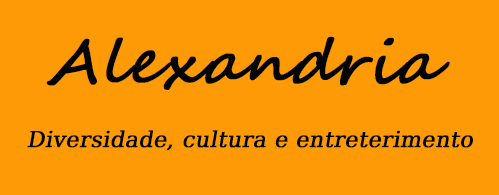
<style>
.page{position:relative;width:499px;height:195px;background:#fd9a06}
.page>*{position:absolute;margin:0}
.t1{font:22px "DejaVuMathTeXGyre-Regular";color:#040200;font-weight:bold;font-style:italic}
</style>
<div class="page">
<p class="t1" style="left:27px;top:130px;width:446px;height:21px">Diversidade, cultura e entreterimento</p>
</div>
